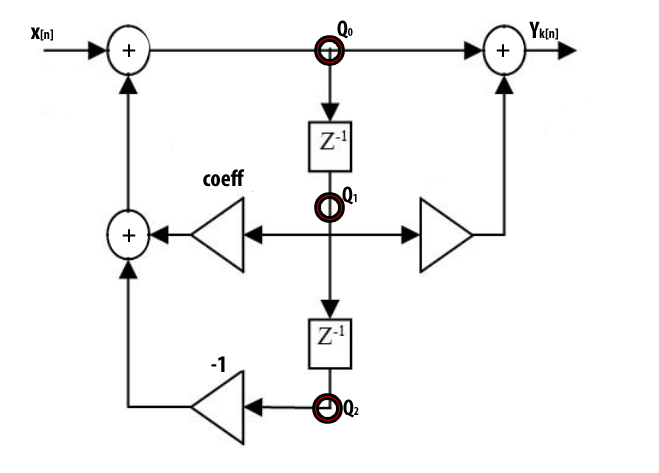
<style>
.page{position:relative;width:659px;height:473px;background:#ffffff}
.page>*{position:absolute;margin:0}
.t1{font:14px "MyriadPro-BoldCond";color:#000000}
.t2{font:24px "MyriadPro-BoldCond";color:#000000}
.t3{font:22.5px "MyriadPro-BoldCond";color:#000000}
.t4{font:12px "MyriadPro-BoldCond";color:#000000}
</style>
<div class="page">
<p class="t1" style="left:30px;top:27px;width:23px;height:14px"><span class="t2">x</span>[n]</p>
<p class="t3" style="left:337px;top:20px;width:16px;height:19px">Q<span class="t4">0</span></p>
<p class="t1" style="left:529px;top:21px;width:29px;height:19px"><span class="t2">Y</span>k[n]</p>
<p class="t2" style="left:122px;top:44px;width:14px;height:13px">+</p>
<p class="t2" style="left:496px;top:44px;width:14px;height:13px">+</p>
<p class="t2" style="left:203px;top:169px;width:42px;height:18px">coeff</p>
<p class="t3" style="left:342px;top:186px;width:15px;height:19px">Q<span class="t4">1</span></p>
<p class="t2" style="left:122px;top:229px;width:14px;height:13px">+</p>
<p class="t2" style="left:211px;top:356px;width:14px;height:16px">-1</p>
<p class="t3" style="left:343px;top:399px;width:16px;height:19px">Q<span class="t4">2</span></p>
</div>
